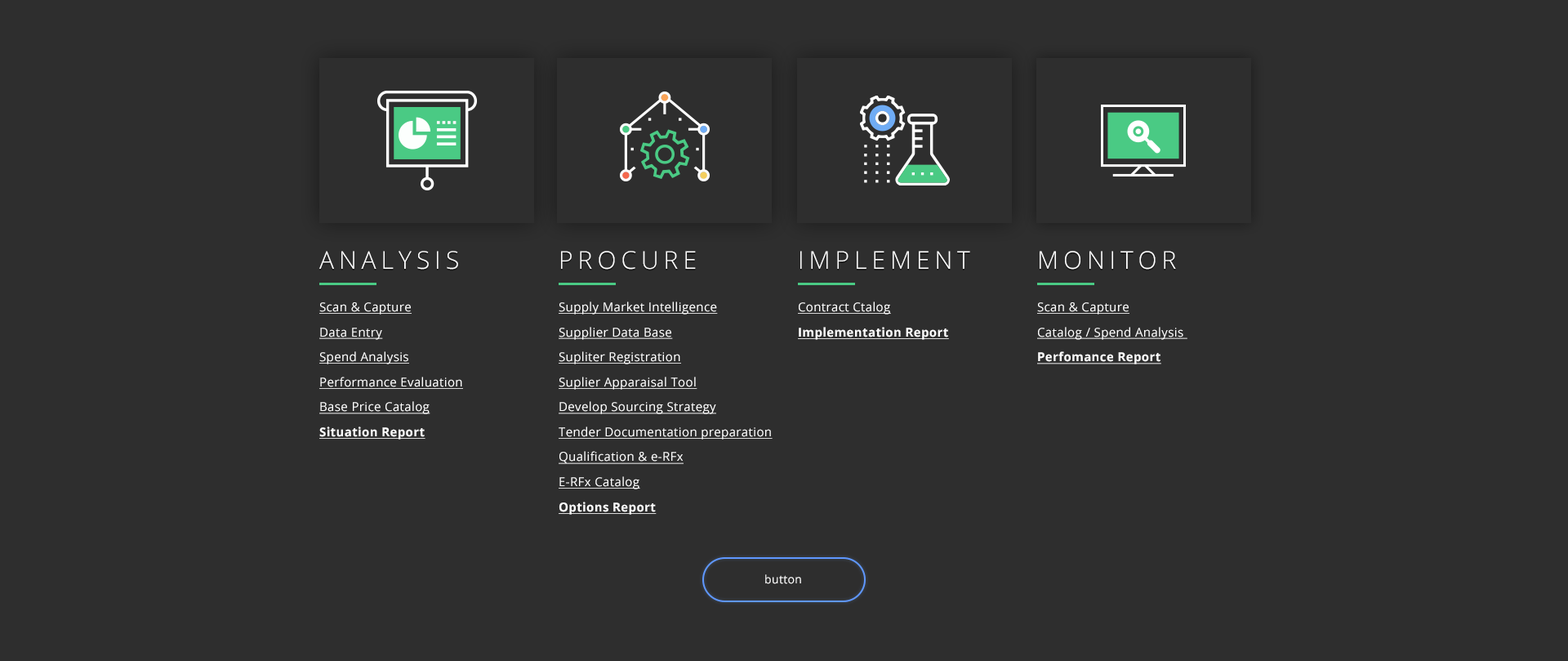
<style>
.page{position:relative;width:1568px;height:661px;background:#2e2e2e}
.page>*{position:absolute;margin:0}
.t1{font:24.5px "OpenSans-Light";letter-spacing:0.2em;color:#ffffff;text-transform:uppercase}
.t2{font:12.2px/24.5px "OpenSans";letter-spacing:0.025em;color:#ffffff;text-decoration:underline}
.t3{font:12.2px/24.5px "OpenSans-Bold";letter-spacing:0.025em;color:#ffffff;text-decoration:underline}
.t4{font:11.4px "OpenSans";letter-spacing:0.025em;color:#ffffff}
</style>
<div class="page">
<p class="t1" style="left:319px;top:251px;width:139px;height:19px">Analysis</p>
<p class="t1" style="left:561px;top:251px;width:135px;height:19px">Procure</p>
<p class="t1" style="left:800px;top:251px;width:170px;height:18px">Implement</p>
<p class="t1" style="left:1040px;top:251px;width:136px;height:19px">Monitor</p>
<p class="t2" style="left:319px;top:302px;width:144px;height:137px">Scan &amp; Capture<br>Data Entry<br>Spend Analysis<br>Performance Evaluation<br>Base Price Catalog<br><span class="t3">Situation Report</span></p>
<p class="t2" style="left:559px;top:301px;width:214px;height:213px">Supply Market Intelligence<br>Supplier Data Base<br>Supliter Registration<br>Suplier Apparaisal Tool<br>Develop Sourcing Strategy<br>Tender Documentation preparation<br>Qualification &amp; e-RFx<br>E-RFx Catalog<br><span class="t3">Options Report</span></p>
<p class="t3" style="left:798px;top:301px;width:151px;height:39px"><span class="t2">Contract Ctalog<br></span>Implementation Report</p>
<p class="t2" style="left:1037px;top:302px;width:150px;height:62px">Scan &amp; Capture<br>Catalog / Spend Analysis <br><span class="t3">Perfomance Report</span></p>
<p class="t4" style="left:765px;top:574px;width:36px;height:10px">button</p>
</div>
